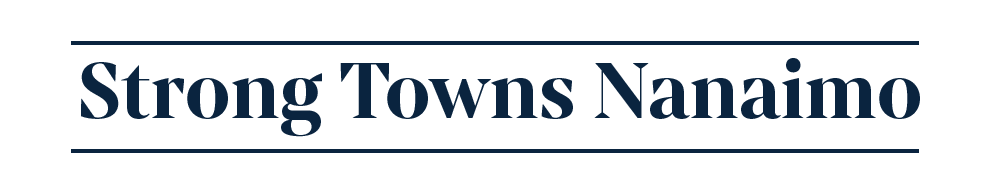
<style>
.page{position:relative;width:1000px;height:180px;background:#ffffff}
.page>*{position:absolute;margin:0}
.t1{font:84.7px "FONTSPRINGDEMO-MixtaEssSharpBoldRegular";color:#0a243f}
</style>
<div class="page">
<p class="t1" style="left:81px;top:58px;width:839px;height:79px">Strong Towns Nanaimo</p>
</div>
